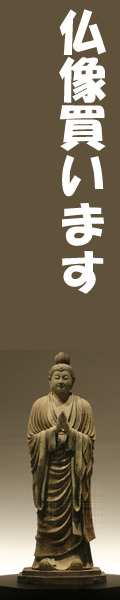
<style>
.page{position:relative;width:120px;height:600px;background:#60513a}
.page>*{position:absolute;margin:0}
.t1{font:48px "HGSoeiKakupoptai";color:#ffffff}
</style>
<div class="page">
<p class="t1" style="left:59px;top:9px;width:47px;height:285px">仏像買います<br>専門店</p>
</div>
